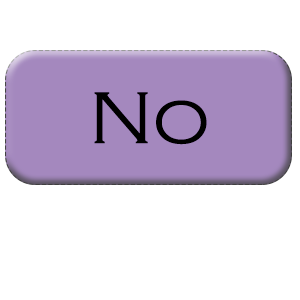
<style>
.page{position:relative;width:300px;height:300px;background:#ffffff}
.page>*{position:absolute;margin:0}
.t1{font:76.2px "CopperplateGothic-Light";color:#000000}
</style>
<div class="page">
<p class="t1" style="left:94px;top:92px;width:113px;height:53px">No</p>
</div>
